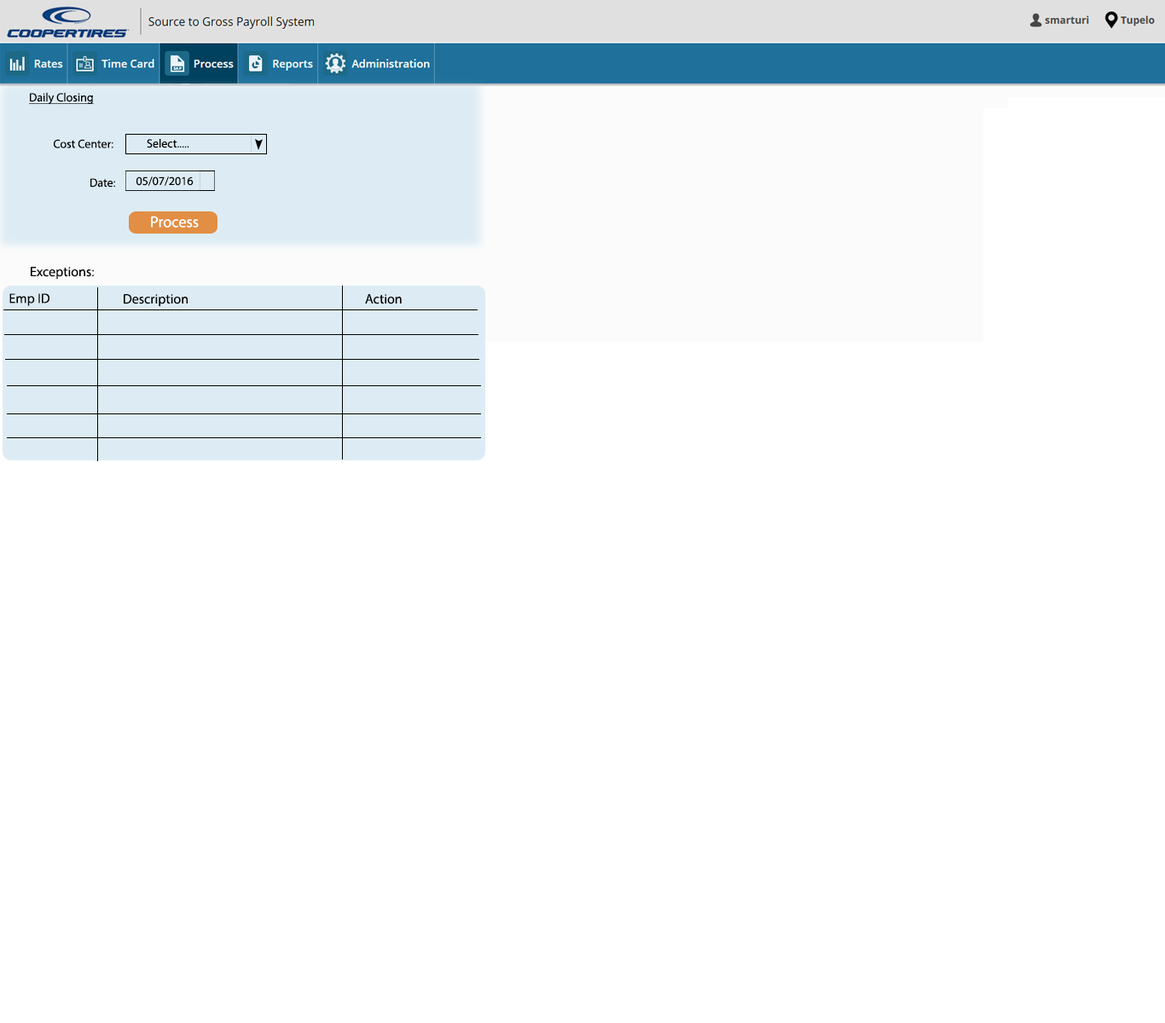
<style>
.page{position:relative;width:1165px;height:1023px;background:#ffffff}
.page>*{position:absolute;margin:0}
.t1{font:11.9px "MyriadPro-Regular";color:#000000;text-decoration:underline}
.t2{font:11.9px "MyriadPro-Regular";color:#000000}
.t3{font:15.7px "MyriadPro-Regular";color:#ffffff}
.t4{font:13.6px "MyriadPro-Regular";color:#000000}
</style>
<div class="page">
<p class="t1" style="left:29px;top:92px;width:65px;height:13px">Daily Closing</p>
<p class="t2" style="left:54px;top:139px;width:59px;height:9px">Cost Center:</p>
<p class="t2" style="left:147px;top:139px;width:42px;height:9px">Select.....</p>
<p class="t2" style="left:90px;top:178px;width:25px;height:10px">Date:</p>
<p class="t2" style="left:136px;top:177px;width:58px;height:9px">05/07/2016</p>
<p class="t3" style="left:151px;top:216px;width:48px;height:12px">Process</p>
<p class="t4" style="left:31px;top:267px;width:64px;height:13px">Exceptions:</p>
<p class="t4" style="left:9px;top:293px;width:40px;height:13px">Emp ID</p>
<p class="t4" style="left:124px;top:294px;width:64px;height:13px">Description</p>
<p class="t4" style="left:365px;top:294px;width:37px;height:10px">Action</p>
</div>
